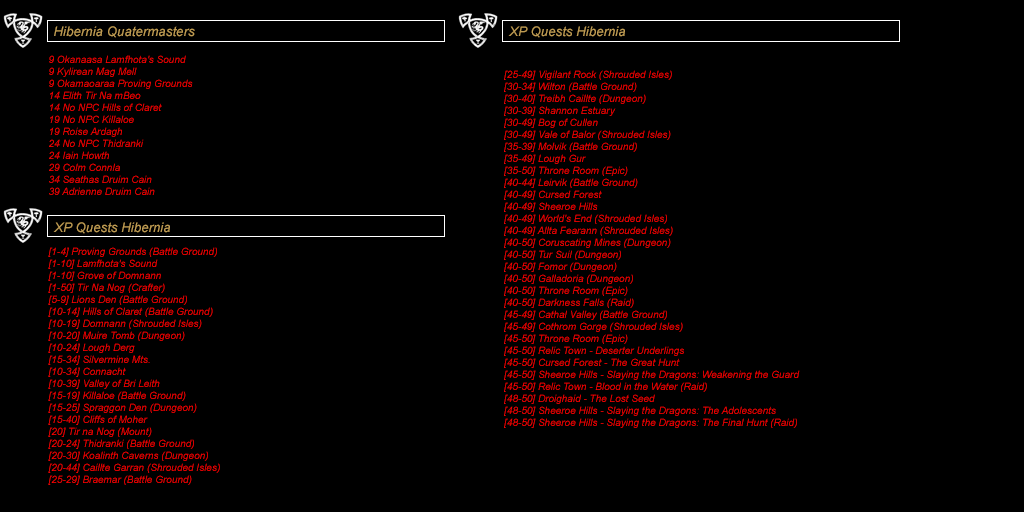
<style>
.page{position:relative;width:1024px;height:512px;background:#000000}
.page>*{position:absolute;margin:0}
.t1{font:13.3px "Arial-ItalicMT";color:#be9b53}
.t2{font:10px "Arial-ItalicMT";color:#ff0000}
</style>
<div class="page">
<p class="t1" style="left:54px;top:26px;width:141px;height:12px">Hibernia Quatermasters</p>
<p class="t1" style="left:508px;top:26px;width:117px;height:12px">XP Quests Hibernia</p>
<p class="t2" style="left:48px;top:55px;width:172px;height:430px">9 Okanaasa Lamfhota's Sound<br>9 Kylirean Mag Mell<br>9 Okamaoaraa Proving Grounds<br>14 Elith Tir Na mBeo<br>14 No NPC Hills of Claret<br>19 No NPC Killaloe<br>19 Roise Ardagh<br>24 No NPC Thidranki<br>24 Iain Howth<br>29 Colm Connla<br>34 Seathas Druim Cain<br>39 Adrienne Druim Cain<br><br><br><br><br>[1-4] Proving Grounds (Battle Ground)<br>[1-10] Lamfhota's Sound<br>[1-10] Grove of Domnann<br>[1-50] Tir Na Nog (Crafter)<br>[5-9] Lions Den (Battle Ground)<br>[10-14] Hills of Claret (Battle Ground)<br>[10-19] Domnann (Shrouded Isles)<br>[10-20] Muire Tomb (Dungeon)<br>[10-24] Lough Derg<br>[15-34] Silvermine Mts.<br>[10-34] Connacht<br>[10-39] Valley of Bri Leith<br>[15-19] Killaloe (Battle Ground)<br>[15-25] Spraggon Den (Dungeon)<br>[15-40] Cliffs of Moher<br>[20] Tir na Nog (Mount)<br>[20-24] Thidranki (Battle Ground)<br>[20-30] Koalinth Caverns (Dungeon)<br>[20-44] Caillte Garran (Shrouded Isles)<br>[25-29] Braemar (Battle Ground)</p>
<p class="t2" style="left:504px;top:70px;width:296px;height:358px">[25-49] Vigilant Rock (Shrouded Isles)<br>[30-34] Wilton (Battle Ground)<br>[30-40] Treibh Caillte (Dungeon)<br>[30-39] Shannon Estuary<br>[30-49] Bog of Cullen<br>[30-49] Vale of Balor (Shrouded Isles)<br>[35-39] Molvik (Battle Ground)<br>[35-49] Lough Gur<br>[35-50] Throne Room (Epic)<br>[40-44] Leirvik (Battle Ground)<br>[40-49] Cursed Forest<br>[40-49] Sheeroe Hills<br>[40-49] World's End (Shrouded Isles)<br>[40-49] Allta Fearann (Shrouded Isles)<br>[40-50] Coruscating Mines (Dungeon)<br>[40-50] Tur Suil (Dungeon)<br>[40-50] Fomor (Dungeon)<br>[40-50] Galladoria (Dungeon)<br>[40-50] Throne Room (Epic)<br>[40-50] Darkness Falls (Raid)<br>[45-49] Cathal Valley (Battle Ground)<br>[45-49] Cothrom Gorge (Shrouded Isles)<br>[45-50] Throne Room (Epic)<br>[45-50] Relic Town - Deserter Underlings<br>[45-50] Cursed Forest - The Great Hunt<br>[45-50] Sheeroe Hills - Slaying the Dragons: Weakening the Guard<br>[45-50] Relic Town - Blood in the Water (Raid)<br>[48-50] Droighaid - The Lost Seed<br>[48-50] Sheeroe Hills - Slaying the Dragons: The Adolescents<br>[48-50] Sheeroe Hills - Slaying the Dragons: The Final Hunt (Raid)</p>
<p class="t1" style="left:53px;top:222px;width:117px;height:12px">XP Quests Hibernia</p>
</div>
